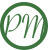
<style>
.page{position:relative;width:50px;height:50px;background:#ffffff}
.page>*{position:absolute;margin:0}
.t1{font:36.5px "SavoyeLetPlain";color:#3d743d}
</style>
<div class="page">
<p class="t1" style="left:4px;top:13px;width:42px;height:26px">PM</p>
</div>
